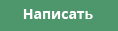
<style>
.page{position:relative;width:118px;height:31px;background:#4e976c}
.page>*{position:absolute;margin:0}
.t1{font:14px "OpenSans-Bold";color:#ffffff}
</style>
<div class="page">
<p class="t1" style="left:23px;top:9px;width:70px;height:10px">Написать</p>
</div>
